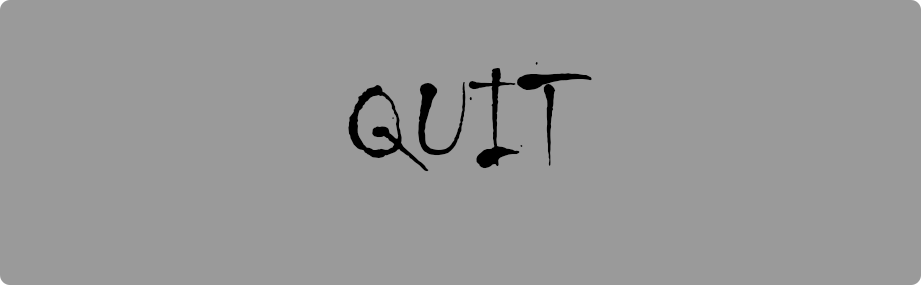
<style>
.page{position:relative;width:921px;height:285px;background:#9a9a9a}
.page>*{position:absolute;margin:0}
.t1{font:141.7px "Chiller-Regular";color:#000000}
</style>
<div class="page">
<p class="t1" style="left:348px;top:62px;width:244px;height:110px">QUIT</p>
</div>
